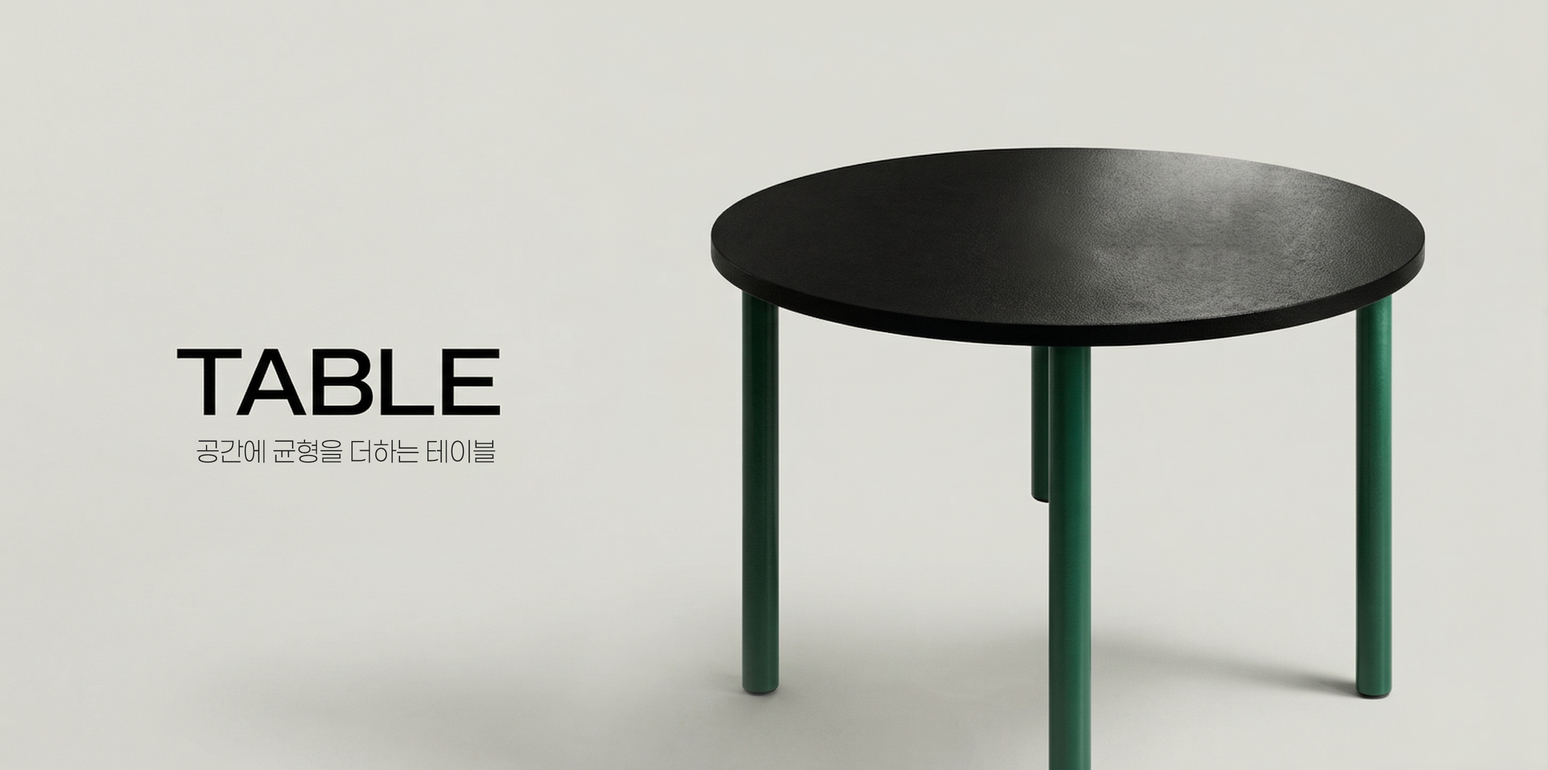
<style>
.page{position:relative;width:1548px;height:770px}
.page>*{position:absolute;margin:0}
.t1{font:26.7px "Paperlogy-2ExtraLight";color:#242424}
</style>
<div class="page">
<p class="t1" style="left:197px;top:440px;width:298px;height:23px">공간에 균형을 더하는 테이블</p>
</div>
